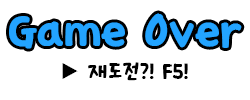
<style>
.page{position:relative;width:250px;height:100px;background:#ffffff}
.page>*{position:absolute;margin:0}
.t1{font:45px "KCC-Murukmuruk";color:#23a4ff}
.t2{font:20px "KCC-Murukmuruk";color:#000000}
</style>
<div class="page">
<p class="t1" style="left:9px;top:13px;width:233px;height:36px">Game Over</p>
<p class="t2" style="left:62px;top:62px;width:126px;height:19px">▶ 재도전?! F5!</p>
</div>
